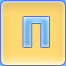
<style>
.page{position:relative;width:66px;height:66px}
.page>*{position:absolute;margin:0}
.t1{font:41px "Tahoma-Bold"}
</style>
<div class="page">
<p class="t1" style="left:23px;top:17px;width:26px;height:30px">П</p>
<p class="t1" style="left:23px;top:17px;width:26px;height:30px">П</p>
</div>
